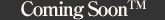
<style>
.page{position:relative;width:165px;height:20px;background:#333333}
.page>*{position:absolute;margin:0}
.t1{font:20px "RyuminPro-ExBold";letter-spacing:-0.08em;color:#fff7f3}
</style>
<div class="page">
<p class="t1" style="left:21px;top:0px;width:126px;height:20px">Coming SoonTM</p>
</div>
